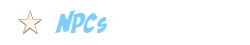
<style>
.page{position:relative;width:250px;height:45px;background:#ffffff}
.page>*{position:absolute;margin:0}
.t1{font:30px "HoustonComicsPersonalUse";color:#7ecef6}
.t2{font:24px "HoustonComicsPersonalUse";color:#7ecef6}
</style>
<div class="page">
<p class="t1" style="left:55px;top:10px;width:52px;height:24px">NPC<span class="t2">s</span></p>
</div>
